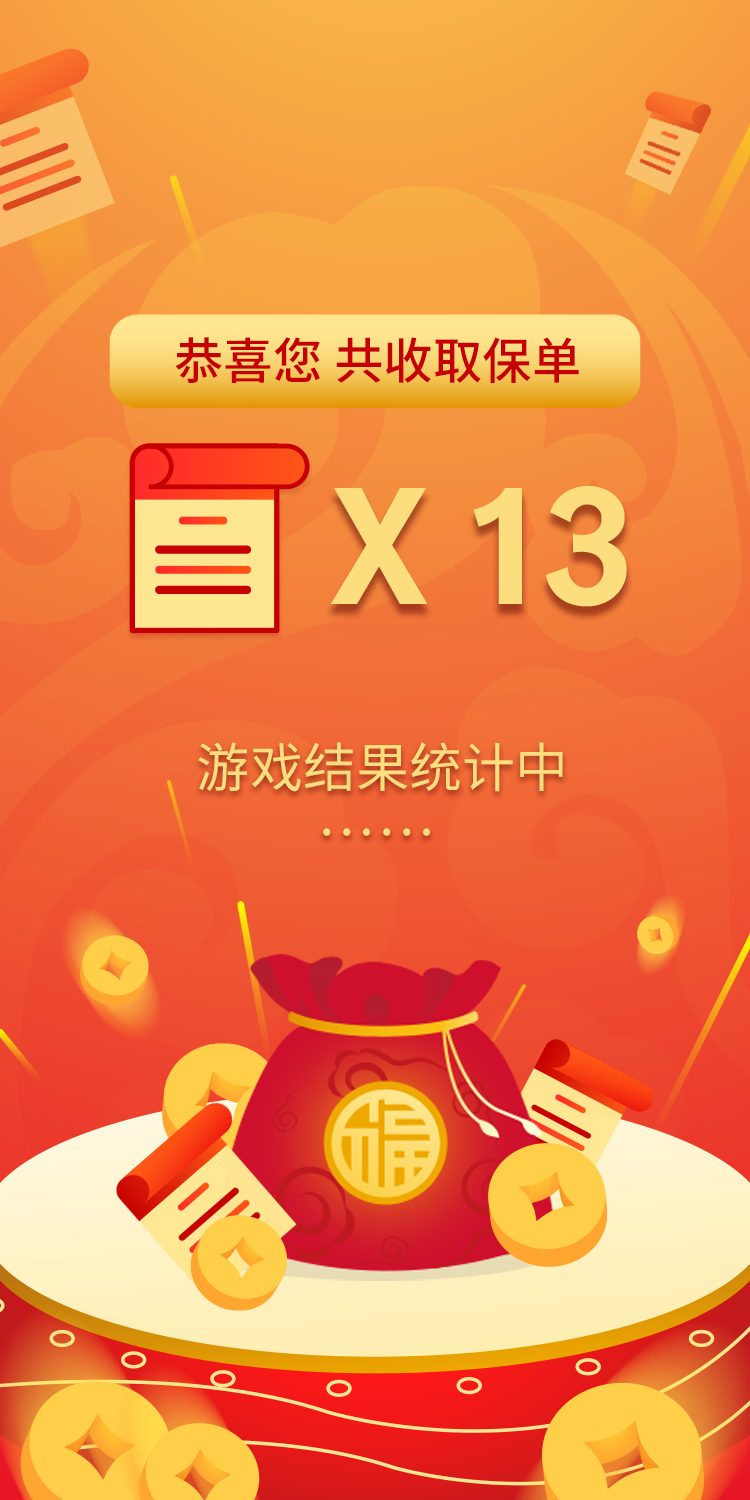
<style>
.page{position:relative;width:750px;height:1500px}
.page>*{position:absolute;margin:0}
.t1{font:49.5px "NotoSansCJKsc-Medium";color:#c60000}
.t2{font:149.2px "ManulifeJHSans-Bold";color:#fdde7e}
.t3{font:53.1px "NotoSansCJKsc-Regular";color:#fdde7e}
</style>
<div class="page">
<p class="t1" style="left:175px;top:337px;width:404px;height:46px">恭喜您 共收取保单</p>
<p class="t2" style="left:330px;top:486px;width:297px;height:121px">X 13</p>
<p class="t3" style="left:198px;top:742px;width:365px;height:50px">游戏结果统计中</p>
<p class="t3" style="left:323px;top:828px;width:107px;height:8px">……</p>
</div>
